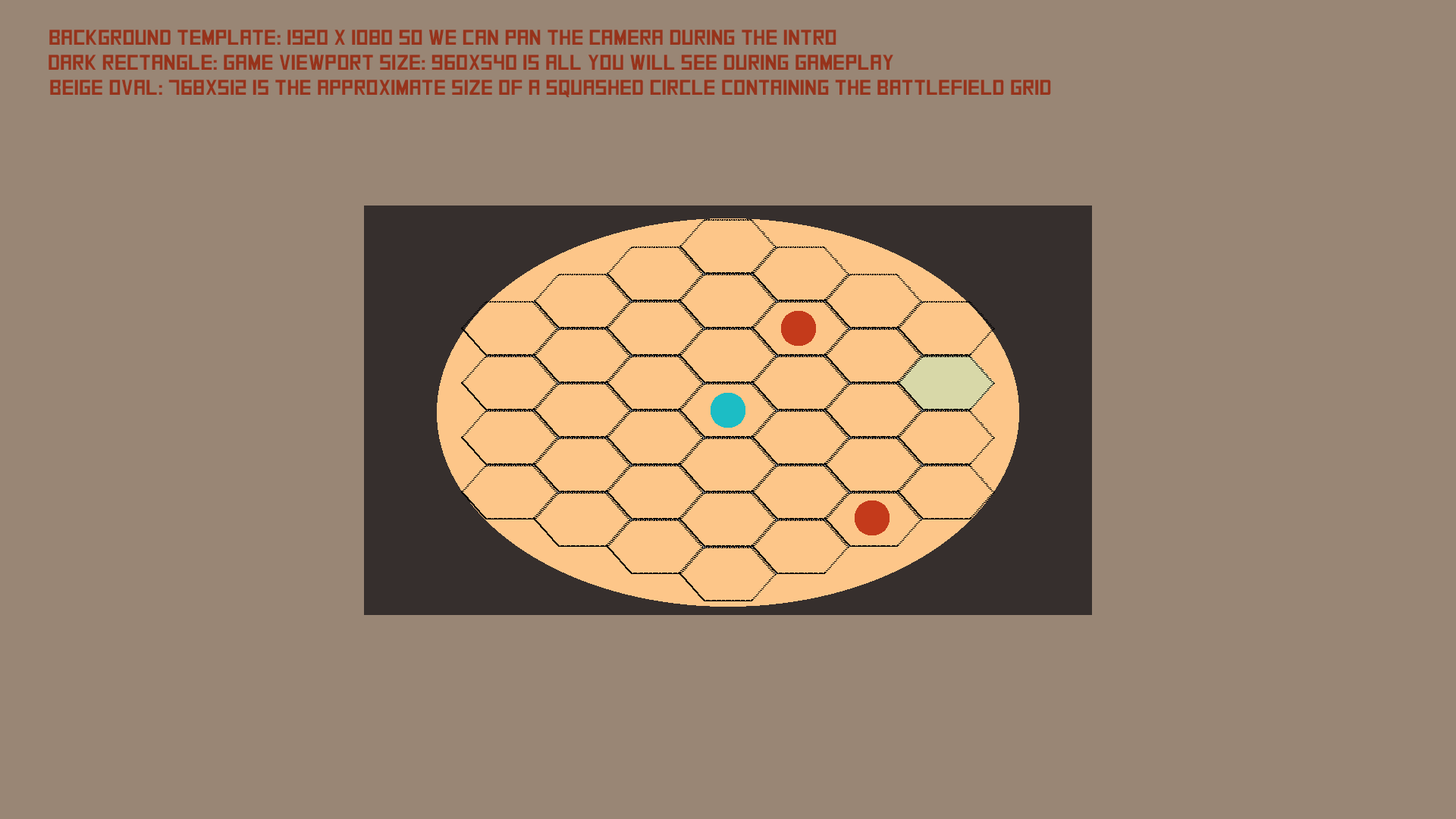
<style>
.page{position:relative;width:1456px;height:819px;background:#998675}
.page>*{position:absolute;margin:0}
.t1{font:21.2px "SquareFont";color:#97331b}
</style>
<div class="page">
<p class="t1" style="left:49px;top:30px;width:787px;height:15px">Background Template: 1920 x 1080 so we can pan the camera during the intro</p>
<p class="t1" style="left:49px;top:55px;width:844px;height:15px">dark rectangle: game viewport size: 960x540 is all you will see during gameplay</p>
<p class="t1" style="left:50px;top:80px;width:1001px;height:18px">beige oval: 768x512 is the approximate size of a squashed circle containing the battlefield grid</p>
</div>
